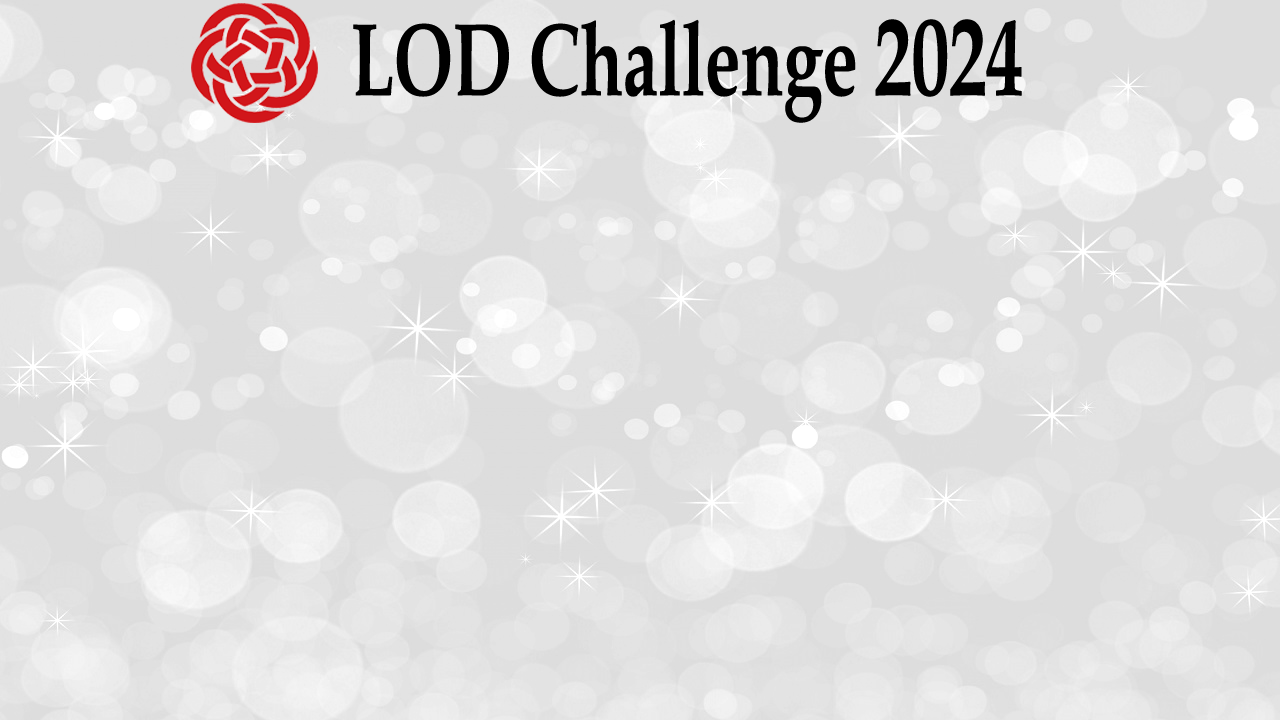
<style>
.page{position:relative;width:1280px;height:720px;background:#dddddd}
.page>*{position:absolute;margin:0}
.t1{font:103.4px "BookAntiqua-Bold";color:#000000;scale:0.68 1}
.t2{font:109.5px "BookAntiqua-Bold";color:#000000;scale:0.68 1}
</style>
<div class="page">
<p class="t1" style="left:353px;top:19px;width:669px;height:104px">LOD Challenge <span class="t2">2024</span></p>
</div>
